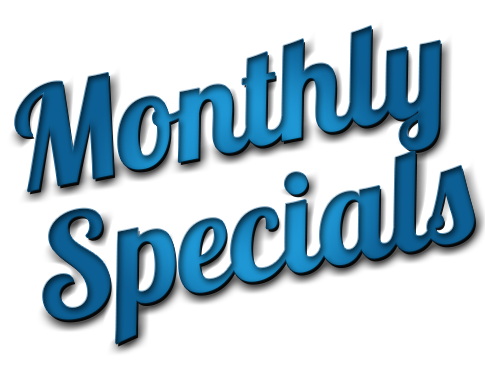
<style>
.page{position:relative;width:485px;height:367px;background:#ffffff}
.page>*{position:absolute;margin:0}
.t1{font:139px/132px "Lobster1.4"}
.t2{font:137px/132px "Lobster1.4"}
</style>
<div class="page">
<p class="t1" style="left:15px;top:26px;width:459px;height:318px;rotate:-11deg"><span class="t2">Monthly<br></span>Specials</p>
</div>
